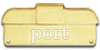
<style>
.page{position:relative;width:100px;height:50px}
.page>*{position:absolute;margin:0}
.t1{font:18px "DejaVuSerif";color:#fef9dc}
</style>
<div class="page">
<p class="t1" style="left:31px;top:27px;width:38px;height:16px">port</p>
</div>
